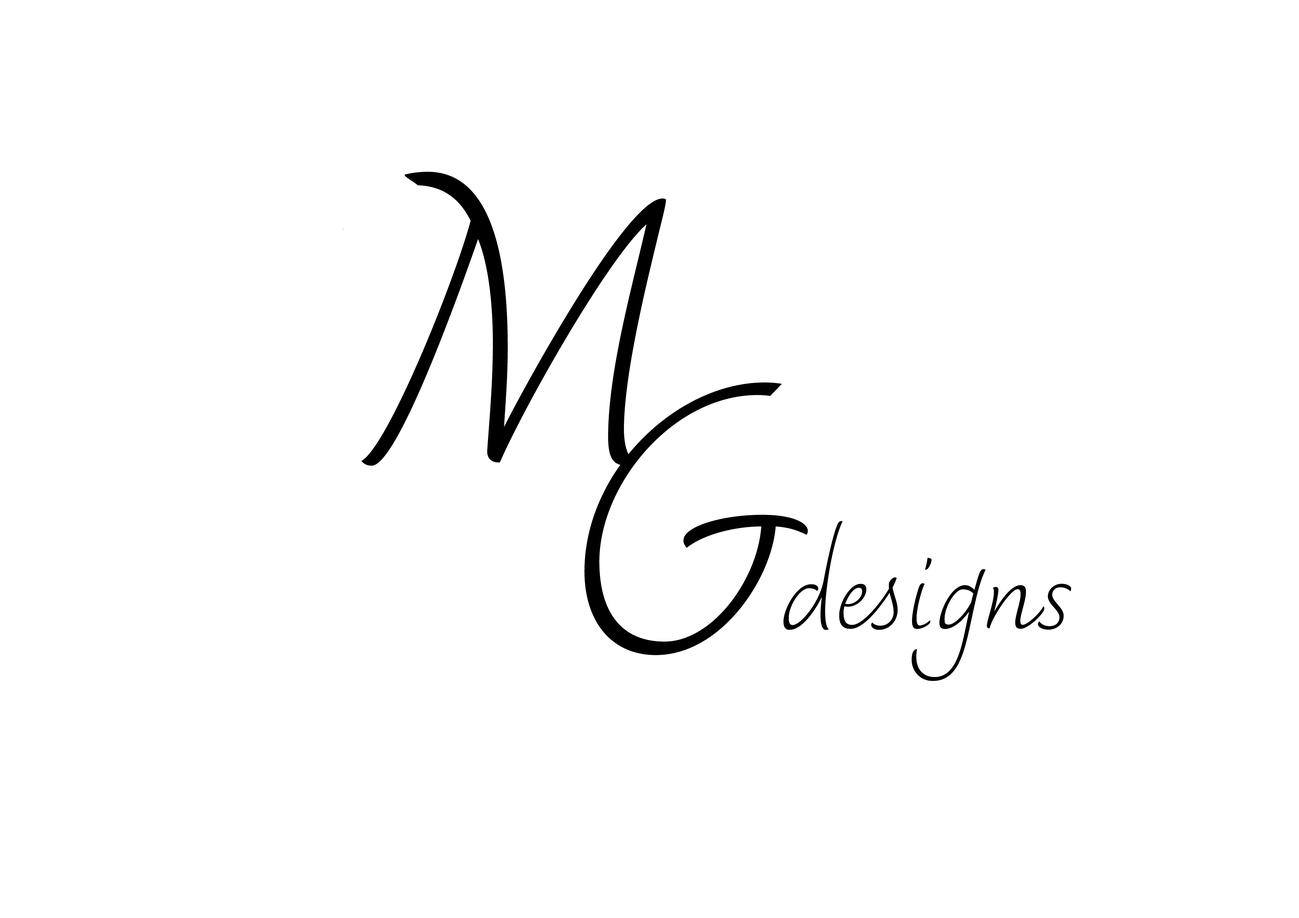
<style>
.page{position:relative;width:1299px;height:918px;background:#ffffff}
.page>*{position:absolute;margin:0}
.t1{font:154.3px "Dolce-Thin";color:#000000}
</style>
<div class="page">
<p class="t1" style="left:783px;top:521px;width:288px;height:160px">designs</p>
</div>
